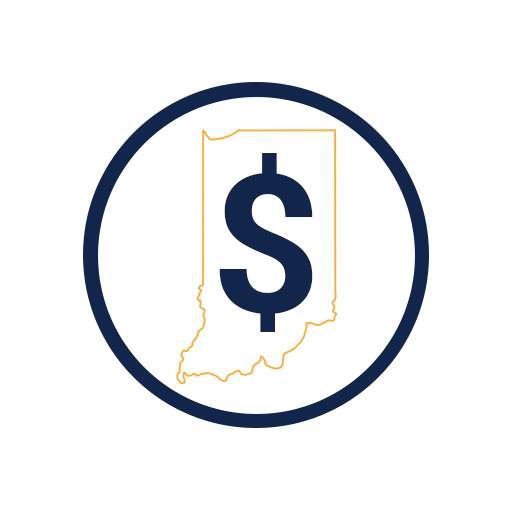
<style>
.page{position:relative;width:512px;height:512px;background:#ffffff}
.page>*{position:absolute;margin:0}
.t1{font:191.9px "Roboto-Bold";color:#11264a}
</style>
<div class="page">
<p class="t1" style="left:219px;top:153px;width:94px;height:179px">$</p>
</div>
